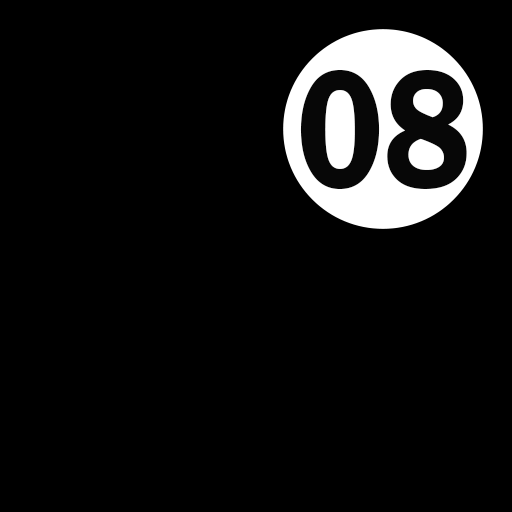
<style>
.page{position:relative;width:512px;height:512px;background:#000000}
.page>*{position:absolute;margin:0}
.t1{font:172.5px "FranklinGothic-Demi";color:#070707;scale:0.87 1}
</style>
<div class="page">
<p class="t1" style="left:300px;top:70px;width:167px;height:119px">08</p>
</div>
